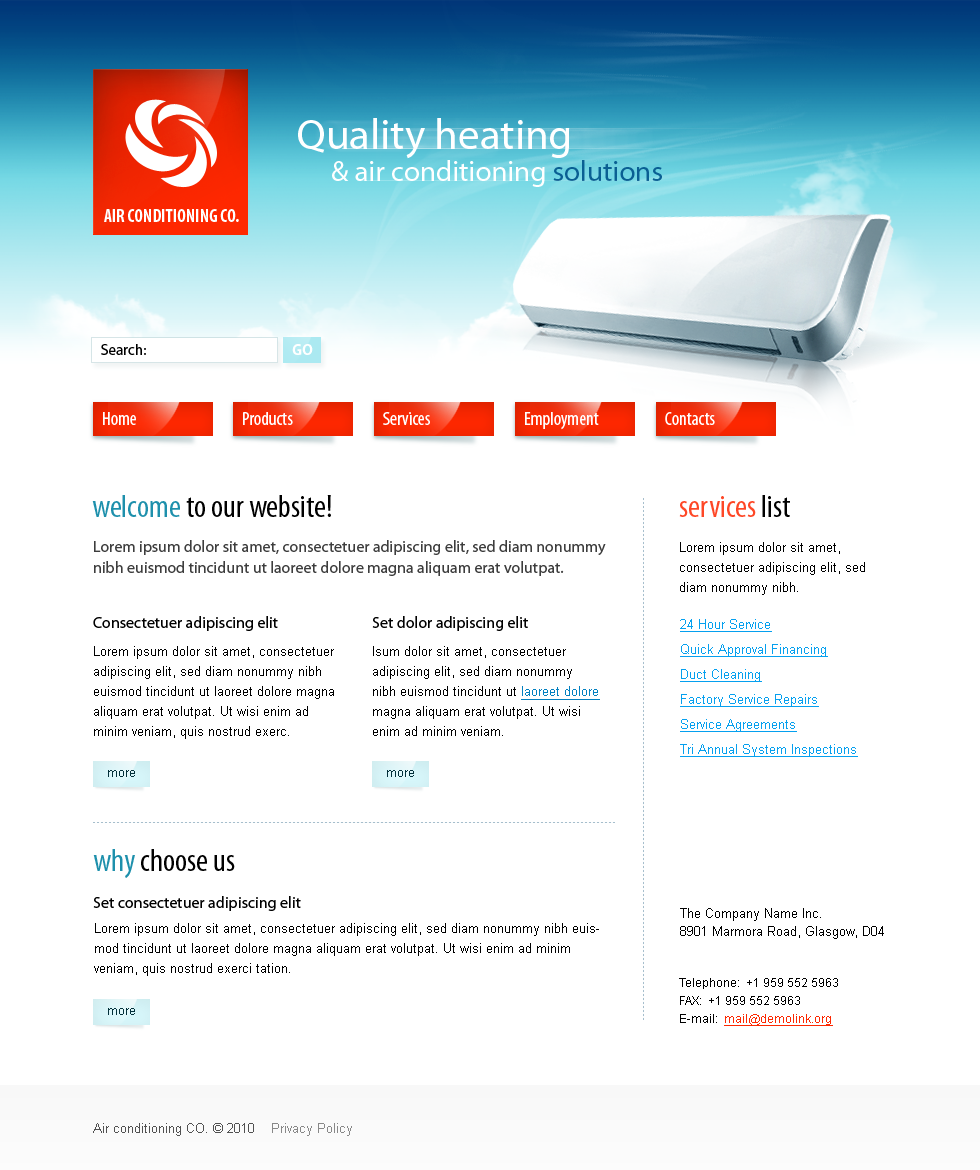
<style>
.page{position:relative;width:980px;height:1170px;background:#ffffff}
.page>*{position:absolute;margin:0}
.t1{font:43px "MyriadPro-Regular";color:#ffffff}
.t2{font:29px "MyriadPro-Regular";color:#ffffff}
.t3{font:29px "MyriadPro-Regular";color:#0a5f93}
.t4{font:18px "MyriadPro-BoldCond";color:#ffffff;text-transform:uppercase}
.t5{font:15px "MyriadPro-Regular";color:#000000}
.t6{font:15px "MyriadPro-Bold";color:#ffffff}
.t7{font:19px "MyriadPro-Cond";color:#ffffff}
.t8{font:32px "MyriadPro-Cond";color:#000000}
.t9{font:32px "MyriadPro-Cond";color:#1e90ac}
.t10{font:32px "MyriadPro-Cond";color:#fe4726}
.t11{font:16px/21px "MyriadPro-Regular";color:#3d3d3d}
.t12{font:13px/20px "ArialMT";color:#000000}
.t13{font:16px "MyriadPro-Regular";color:#000000}
.t14{font:13px/25px "ArialMT";color:#05a0ef;text-decoration:underline}
.t15{font:13px/20px "ArialMT";color:#0380c0;text-decoration:underline}
.t16{font:13px "ArialMT";color:#03303a}
.t17{font:13px/18px "ArialMT";color:#000000}
.t18{font:12px/18px "ArialMT";color:#000000}
.t19{font:12px/18px "ArialMT";color:#fd2700;text-decoration:underline}
.t20{font:13px "ArialMT";color:#515151}
.t21{font:13px "ArialMT";color:#888888}
</style>
<div class="page">
<p class="t1" style="left:298px;top:118px;width:272px;height:41px">Quality heating</p>
<p class="t2" style="left:332px;top:160px;width:330px;height:27px">&amp; air conditioning <span class="t3">solutions</span></p>
<p class="t4" style="left:104px;top:209px;width:135px;height:13px">Air conditioning CO.</p>
<p class="t5" style="left:101px;top:344px;width:45px;height:11px">Search:</p>
<p class="t6" style="left:292px;top:344px;width:21px;height:11px">GO</p>
<p class="t7" style="left:103px;top:412px;width:33px;height:13px">Home</p>
<p class="t7" style="left:243px;top:412px;width:50px;height:13px">Products</p>
<p class="t7" style="left:383px;top:412px;width:47px;height:13px">Services</p>
<p class="t7" style="left:525px;top:412px;width:74px;height:18px">Employment</p>
<p class="t7" style="left:665px;top:412px;width:50px;height:13px">Contacts</p>
<p class="t8" style="left:92px;top:495px;width:239px;height:22px"><span class="t9">welcome</span> to our website!</p>
<p class="t10" style="left:679px;top:495px;width:111px;height:22px">services<span class="t8"> list</span></p>
<p class="t11" style="left:94px;top:540px;width:512px;height:36px">Lorem ipsum dolor sit amet, consectetuer adipiscing elit, sed diam nonummy nibh euismod tincidunt ut laoreet dolore magna aliquam erat volutpat.</p>
<p class="t12" style="left:680px;top:542px;width:185px;height:53px">Lorem ipsum dolor sit amet, consectetuer adipiscing elit, sed diam nonummy nibh.</p>
<p class="t13" style="left:93px;top:616px;width:185px;height:15px">Consectetuer adipiscing elit</p>
<p class="t13" style="left:372px;top:616px;width:156px;height:15px">Set dolor adipiscing elit</p>
<p class="t14" style="left:680px;top:619px;width:178px;height:138px">24 Hour Service<br>Quick Approval Financing<br>Duct Cleaning<br>Factory Service Repairs<br>Service Agreements<br>Tri Annual System Inspections</p>
<p class="t12" style="left:94px;top:646px;width:240px;height:93px">Lorem ipsum dolor sit amet, consectetuer adipiscing elit, sed diam nonummy nibh euismod tincidunt ut laoreet dolore magna aliquam erat volutpat. Ut wisi enim ad minim veniam, quis nostrud exerc.</p>
<p class="t12" style="left:373px;top:646px;width:227px;height:90px">Isum dolor sit amet, consectetuer adipiscing elit, sed diam nonummy nibh euismod tincidunt ut <span class="t15">laoreet dolore</span> magna aliquam erat volutpat. Ut wisi enim ad minim veniam.</p>
<p class="t16" style="left:108px;top:770px;width:27px;height:7px">more</p>
<p class="t16" style="left:387px;top:770px;width:27px;height:7px">more</p>
<p class="t8" style="left:93px;top:849px;width:142px;height:29px"><span class="t9">why </span>choose us</p>
<p class="t13" style="left:93px;top:896px;width:208px;height:15px">Set consectetuer adipiscing elit</p>
<p class="t17" style="left:680px;top:908px;width:204px;height:31px">The Company Name Inc.<br>8901 Marmora Road, Glasgow, D04 89GR.</p>
<p class="t12" style="left:94px;top:923px;width:505px;height:53px">Lorem ipsum dolor sit amet, consectetuer adipiscing elit, sed diam nonummy nibh euismod tincidunt ut laoreet dolore magna aliquam erat volutpat. Ut wisi enim ad minim veniam, quis nostrud exerci tation.</p>
<p class="t18" style="left:679px;top:978px;width:159px;height:48px">Telephone:  +1 959 552 5963<br>FAX:  +1 959 552 5963<br>E-mail:  <span class="t19">mail@demolink.org</span></p>
<p class="t16" style="left:108px;top:1008px;width:27px;height:7px">more</p>
<p class="t20" style="left:93px;top:1123px;width:259px;height:13px">Air conditioning CO. © 2010<span class="t21">    Privacy Policy</span></p>
</div>
